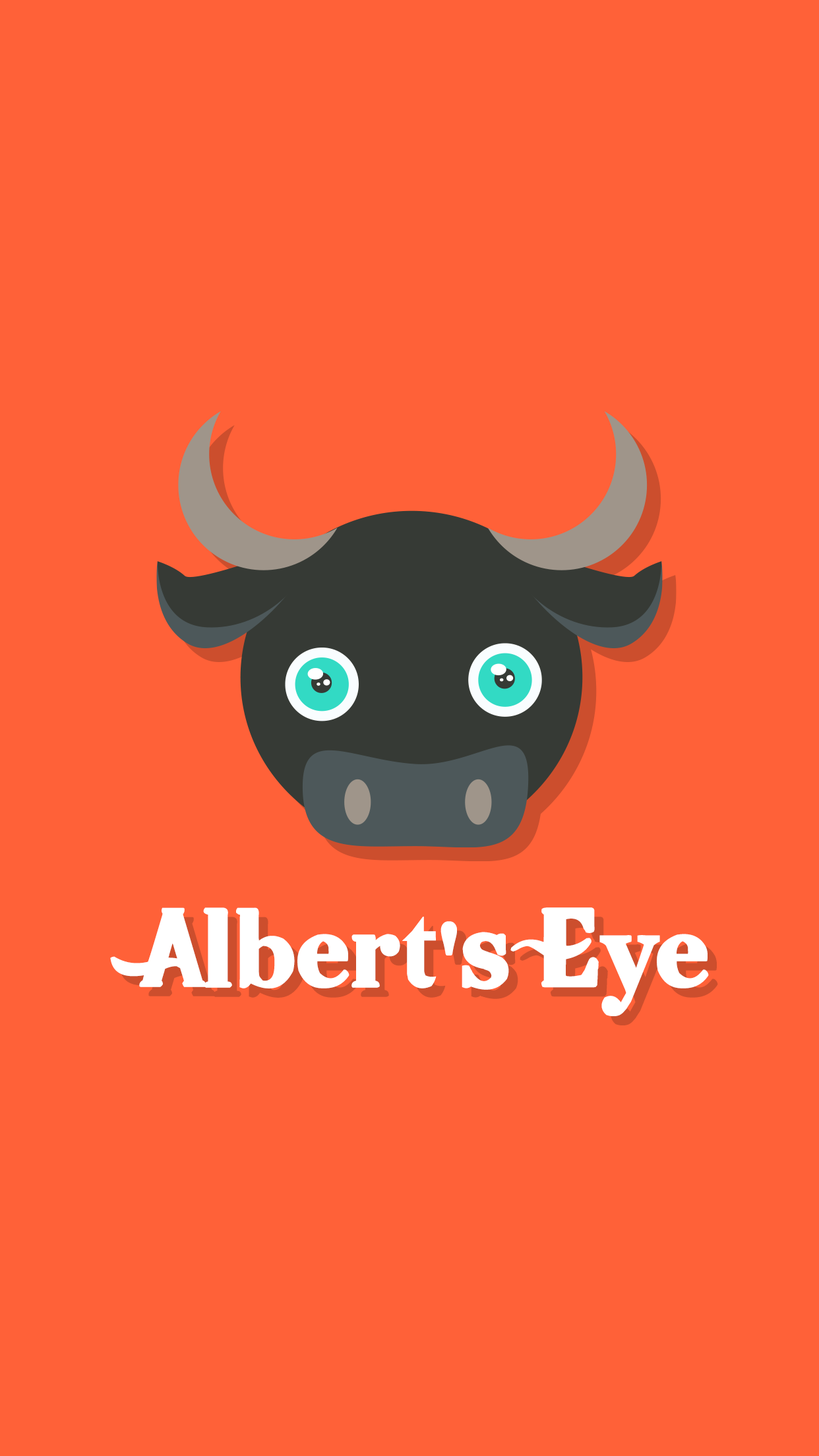
<style>
.page{position:relative;width:819px;height:1456px;background:#ff6138}
.page>*{position:absolute;margin:0}
.t1{font:98.9px "HotPizza";color:#ffffff}
</style>
<div class="page">
<p class="t1" style="left:110px;top:907px;width:599px;height:109px">Albert's Eye</p>
</div>
